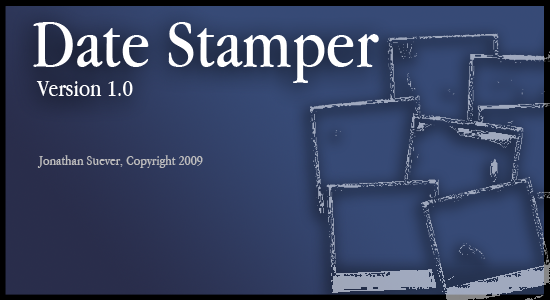
<style>
.page{position:relative;width:550px;height:300px}
.page>*{position:absolute;margin:0}
.t1{font:72px "AppleGaramond";color:#ffffff}
.t2{font:24px "AppleGaramond";color:#ffffff}
.t3{font:14px "AppleGaramond";color:#bebdbd}
</style>
<div class="page">
<p class="t1" style="left:33px;top:22px;width:346px;height:74px">Date Stamper<br><span class="t2"> Version 1.0</span></p>
<p class="t3" style="left:37px;top:155px;width:166px;height:13px">Jonathan Suever, Copyright 2009</p>
</div>
